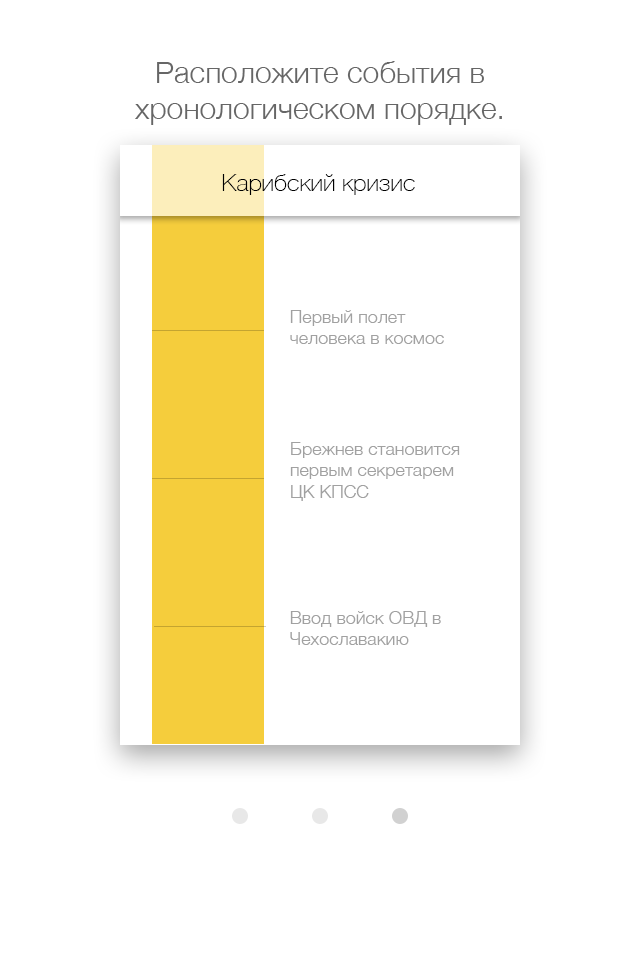
<style>
.page{position:relative;width:640px;height:960px;background:#ffffff}
.page>*{position:absolute;margin:0}
.t1{font:30px "HelveticaNeue-Light";color:#666666}
.t2{font:24px "HelveticaNeue-Thin";color:#000000}
.t3{font:18px "HelveticaNeue-Light";color:#a1a1a1}
</style>
<div class="page">
<p class="t1" style="left:135px;top:61px;width:367px;height:64px;text-align:center">Расположите события в хронологическом порядке.</p>
<p class="t2" style="left:222px;top:174px;width:193px;height:21px">Карибский кризис</p>
<p class="t3" style="left:290px;top:310px;width:154px;height:34px">Первый полет человека в космос</p>
<p class="t3" style="left:290px;top:442px;width:170px;height:59px">Брежнев становится первым секретарем <br>ЦК КПСС</p>
<p class="t3" style="left:290px;top:611px;width:151px;height:34px">Ввод войск ОВД в Чехославакию</p>
</div>
